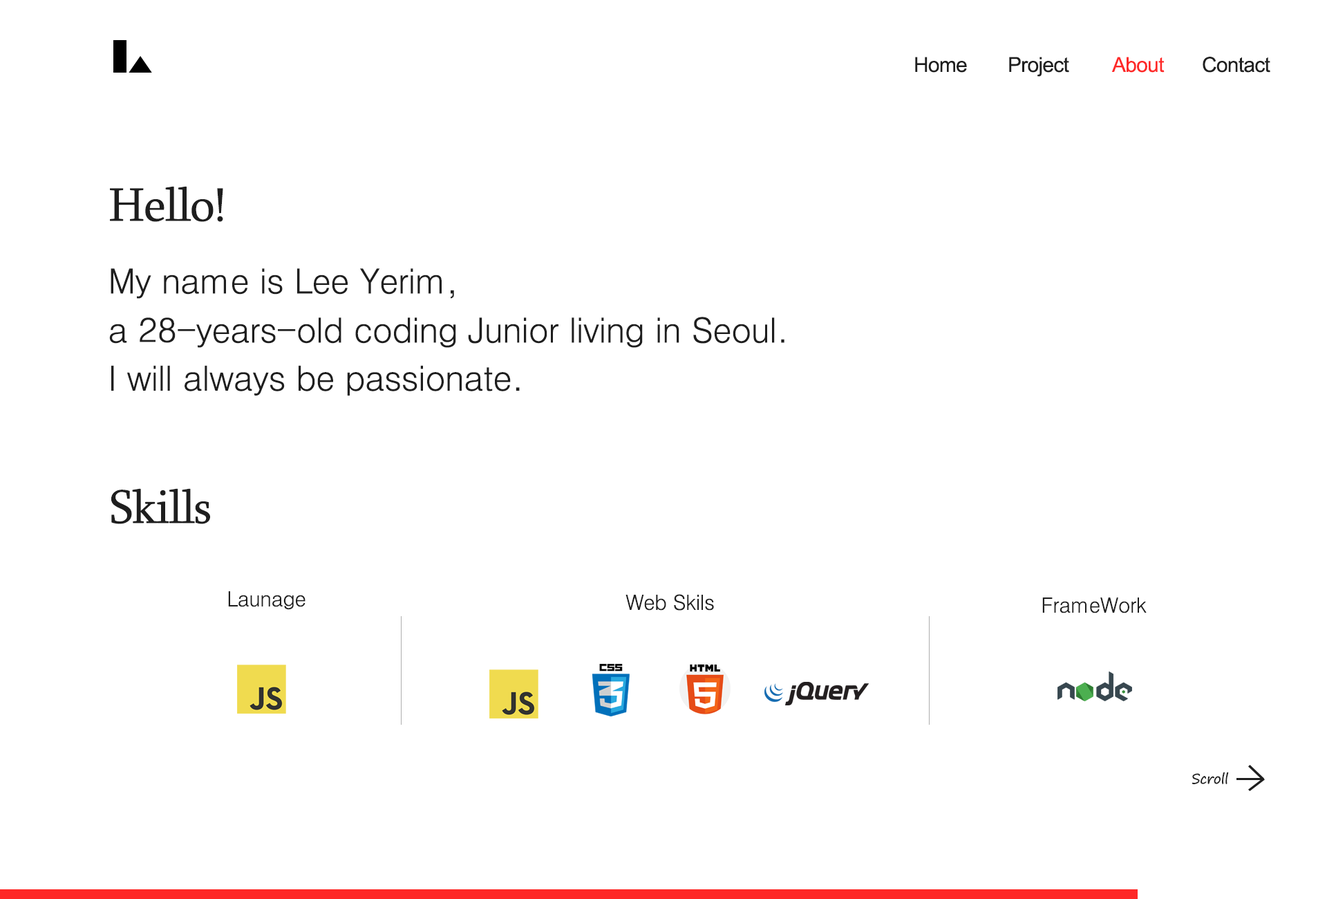
<style>
.page{position:relative;width:1327px;height:899px;background:#ffffff}
.page>*{position:absolute;margin:0}
.t1{font:20.7px "ArialMT";letter-spacing:-0.025em;color:#1f1f1f}
.t2{font:20.7px "ArialMT";letter-spacing:-0.025em;color:#fe2827}
.t3{font:48.4px "Sylfaen";letter-spacing:-0.025em;color:#1e1e1e}
.t4{font:34.6px "Dotum";letter-spacing:-0.025em;color:#1e1e1e}
.t5{font:20.7px "Dotum";letter-spacing:-0.025em;color:#1e1e1e}
.t6{font:13.8px "SegoePrint";letter-spacing:-0.025em;color:#1f1f1f}
</style>
<div class="page">
<p class="t1" style="left:915px;top:57px;width:52px;height:16px">Home</p>
<p class="t1" style="left:1009px;top:57px;width:60px;height:20px">Project</p>
<p class="t2" style="left:1111px;top:57px;width:54px;height:16px">About</p>
<p class="t1" style="left:1203px;top:57px;width:67px;height:16px">Contact</p>
<p class="t3" style="left:110px;top:186px;width:113px;height:36px">Hello!</p>
<p class="t4" style="left:111px;top:268px;width:343px;height:31px">My name is Lee Yerim,</p>
<p class="t4" style="left:109px;top:317px;width:675px;height:31px">a 28-years-old coding Junior living in Seoul.</p>
<p class="t4" style="left:111px;top:365px;width:409px;height:30px">I will always be passionate.</p>
<p class="t3" style="left:111px;top:488px;width:99px;height:36px">Skills</p>
<p class="t5" style="left:228px;top:591px;width:78px;height:19px">Launage</p>
<p class="t5" style="left:626px;top:594px;width:88px;height:16px">Web Skils</p>
<p class="t5" style="left:1042px;top:597px;width:105px;height:16px">FrameWork</p>
<p class="t6" style="left:1192px;top:771px;width:37px;height:13px">Scroll</p>
</div>
